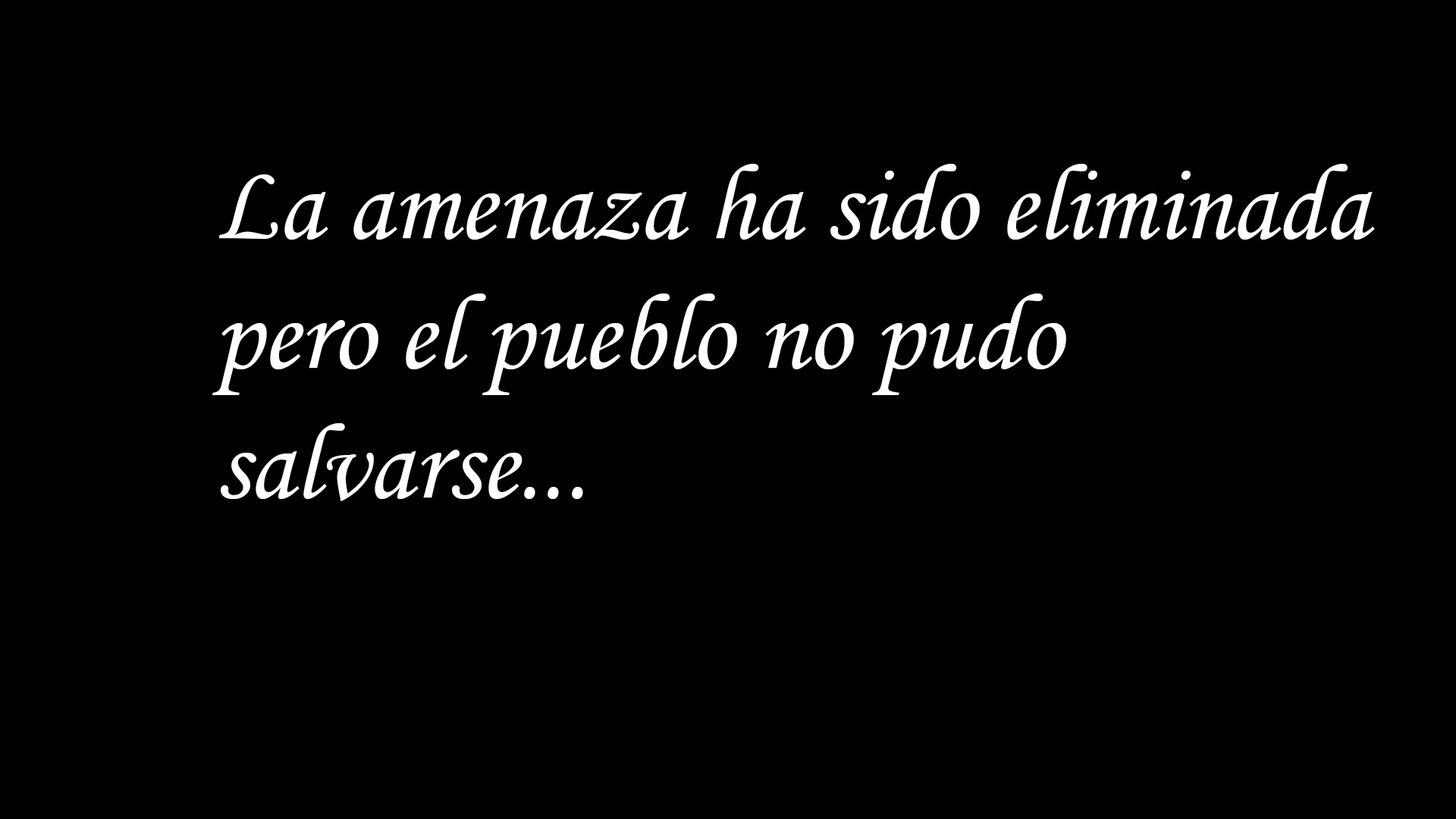
<style>
.page{position:relative;width:1456px;height:819px;background:#000000}
.page>*{position:absolute;margin:0}
.t1{font:108.2px "MonotypeCorsiva";color:#ffffff}
</style>
<div class="page">
<p class="t1" style="left:212px;top:164px;width:1163px;height:337px">La amenaza ha sido eliminada<br>pero el pueblo no pudo <br>salvarse...</p>
</div>
